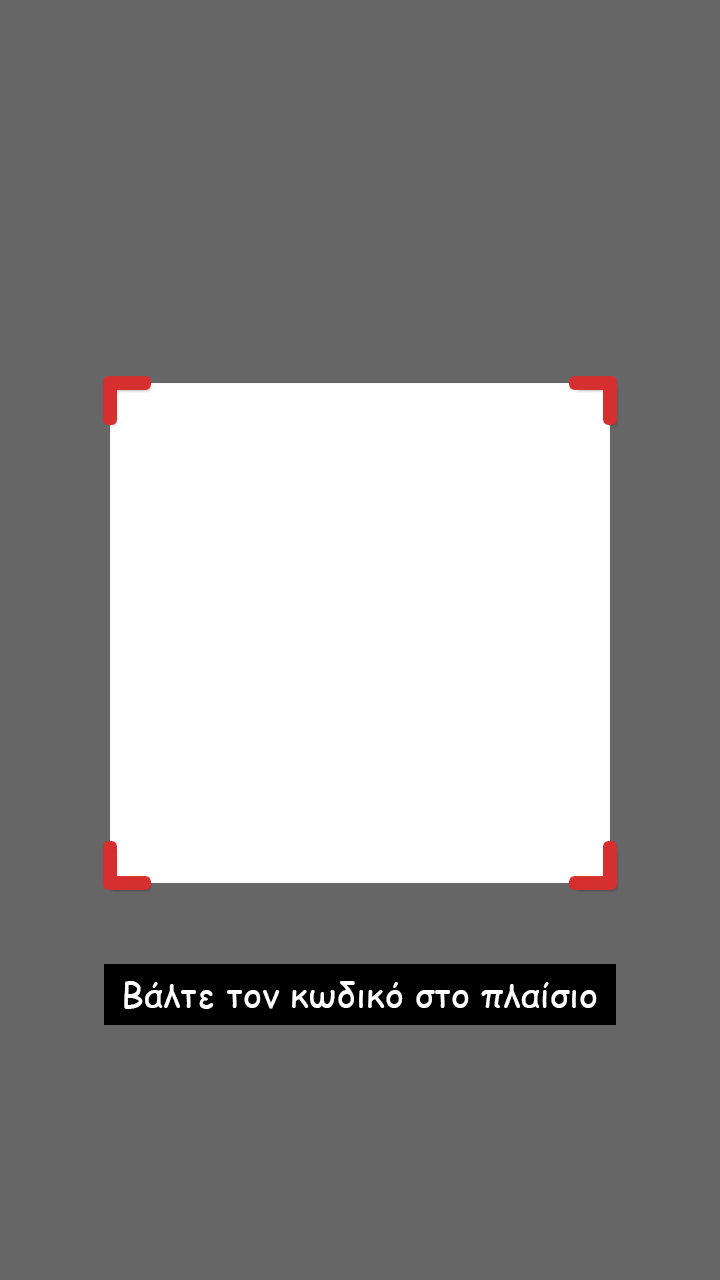
<style>
.page{position:relative;width:720px;height:1280px;background:#666666}
.page>*{position:absolute;margin:0}
.t1{font:36px "ComicSansMS";color:#ffffff}
</style>
<div class="page">
<p class="t1" style="left:124px;top:981px;width:473px;height:28px">Βάλτε τον κωδικό στο πλαίσιο</p>
</div>
